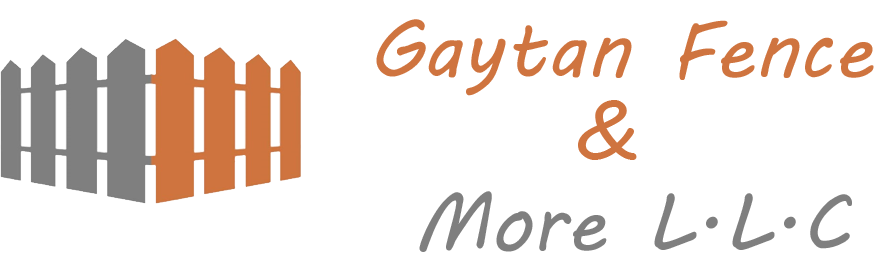
<style>
.page{position:relative;width:880px;height:267px;background:#ffffff}
.page>*{position:absolute;margin:0}
.t1{font:80.8px "MVBoli";color:#cf743f}
.t2{font:84.1px "MVBoli";color:#cf743f}
.t3{font:80.8px "MVBoli";color:#7f7f7f}
</style>
<div class="page">
<p class="t1" style="left:376px;top:19px;width:498px;height:77px">Gaytan Fence</p>
<p class="t2" style="left:578px;top:100px;width:59px;height:60px">&amp;</p>
<p class="t3" style="left:419px;top:191px;width:433px;height:61px">More L.L.C</p>
</div>
